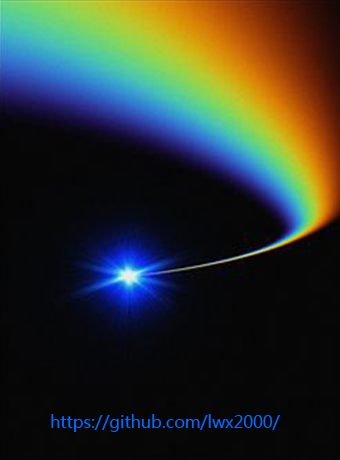
<style>
.page{position:relative;width:340px;height:460px;background:#060606}
.page>*{position:absolute;margin:0}
.t1{font:16.7px "MicrosoftYaHei";color:#0668fc}
</style>
<div class="page">
<p class="t1" style="left:51px;top:414px;width:229px;height:18px">https://github.com/lwx2000/</p>
</div>
